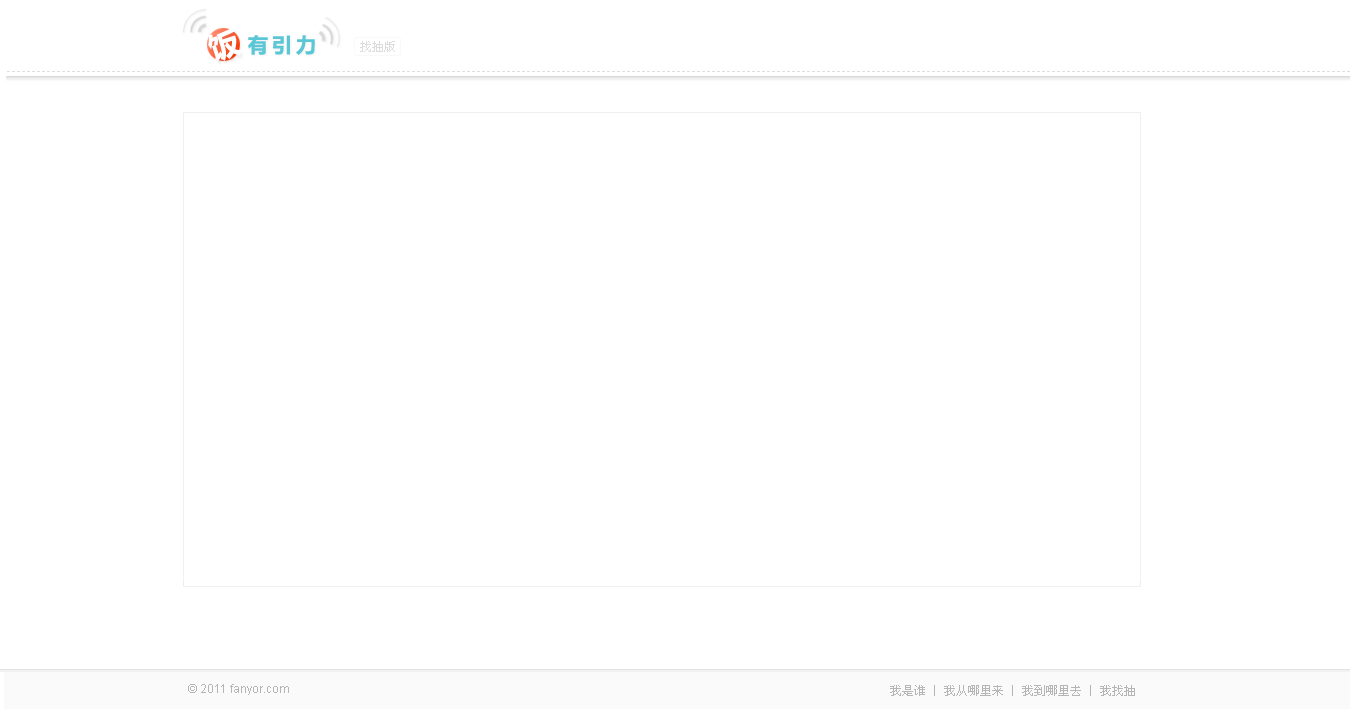
<style>
.page{position:relative;width:1350px;height:709px;background:#ffffff}
.page>*{position:absolute;margin:0}
.t1{font:30px "MicrosoftYaHei";letter-spacing:0.2em;color:#ffffff}
.t2{font:20px "MicrosoftYaHei";letter-spacing:0.2em;color:#5bc7d6}
.t3{font:12px "SimSun";color:#dcdcdc}
.t4{font:12px "ArialMT";color:#b5b5b5}
.t5{font:12px "SimSun";color:#b5b5b5}
</style>
<div class="page">
<p class="t1" style="left:208px;top:28px;width:33px;height:34px;rotate:-18deg">饭</p>
<p class="t2" style="left:248px;top:35px;width:67px;height:20px">有引力</p>
<p class="t3" style="left:360px;top:41px;width:35px;height:11px">找抽版</p>
<p class="t4" style="left:188px;top:684px;width:101px;height:11px">© 2011 fanyor.com</p>
<p class="t5" style="left:890px;top:685px;width:245px;height:11px">我是谁   我从哪里来   我到哪里去   我找抽</p>
</div>
